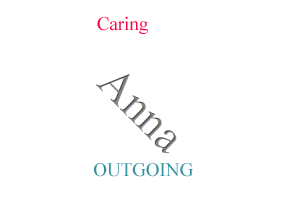
<style>
.page{position:relative;width:288px;height:212px;background:#ffffff}
.page>*{position:absolute;margin:0}
.t1{font:18.9px "TimesNewRomanPSMT";color:#fb0345}
.t2{font:18.9px "TimesNewRomanPSMT";color:#3492a0}
</style>
<div class="page">
<p class="t1" style="left:97px;top:16px;width:51px;height:18px">Caring</p>
<p class="t2" style="left:94px;top:163px;width:100px;height:14px">OUTGOING</p>
</div>
